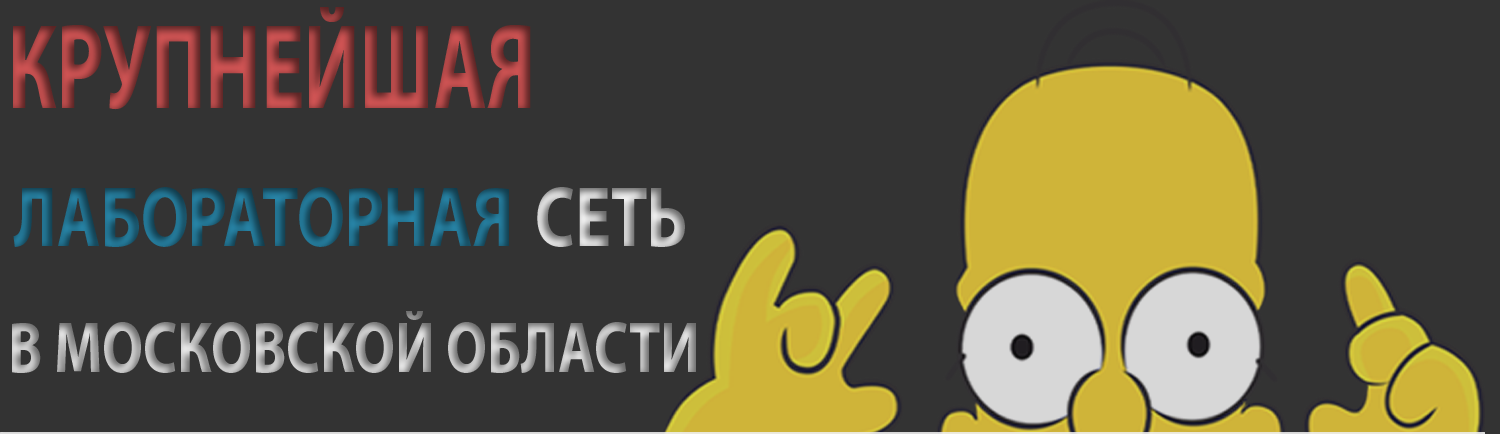
<style>
.page{position:relative;width:1500px;height:434px;background:#333333}
.page>*{position:absolute;margin:0}
.t1{font:122.4px "MyriadPro-Bold";scale:0.66 1}
.t2{font:85.7px "MyriadPro-Bold";scale:0.78 1}
.t3{font:73.4px "MyriadPro-Bold";scale:0.78 1}
</style>
<div class="page">
<p class="t1" style="left:13px;top:7px;width:518px;height:103px">КРУПНЕЙШАЯ</p>
<p class="t2" style="left:13px;top:187px;width:496px;height:60px">ЛАБОРАТОРНАЯ</p>
<p class="t2" style="left:537px;top:187px;width:148px;height:60px">СЕТЬ</p>
<p class="t3" style="left:12px;top:311px;width:684px;height:62px">В МОСКОВСКОЙ ОБЛАСТИ</p>
</div>
